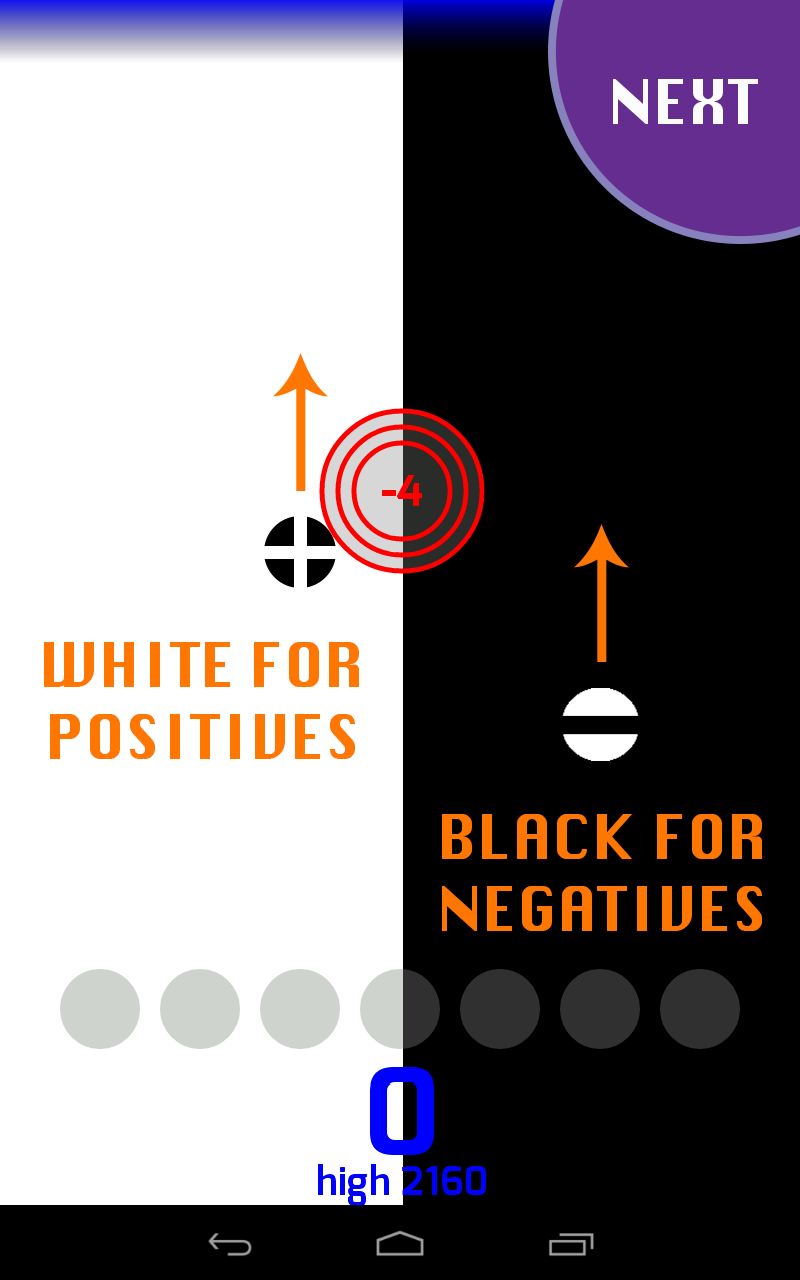
<style>
.page{position:relative;width:800px;height:1280px;background:#000000}
.page>*{position:absolute;margin:0}
.t1{font:60px "Silom";color:#fcfcfc}
.t2{font:60px "Silom";color:#ff7600}
</style>
<div class="page">
<p class="t1" style="left:613px;top:79px;width:145px;height:45px">NEXT</p>
<p class="t2" style="left:44px;top:642px;width:315px;height:117px;text-align:center">WHITE FOR<br>POSITIVES</p>
<p class="t2" style="left:442px;top:814px;width:320px;height:117px;text-align:center">BLACK FOR<br>NEGATIVES</p>
</div>
